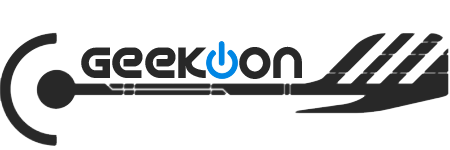
<style>
.page{position:relative;width:450px;height:150px;background:#ffffff}
.page>*{position:absolute;margin:0}
.t1{font:48px "SpinCycleOT";color:#282828}
</style>
<div class="page">
<p class="t1" style="left:81px;top:46px;width:221px;height:33px">Geek  on</p>
</div>
